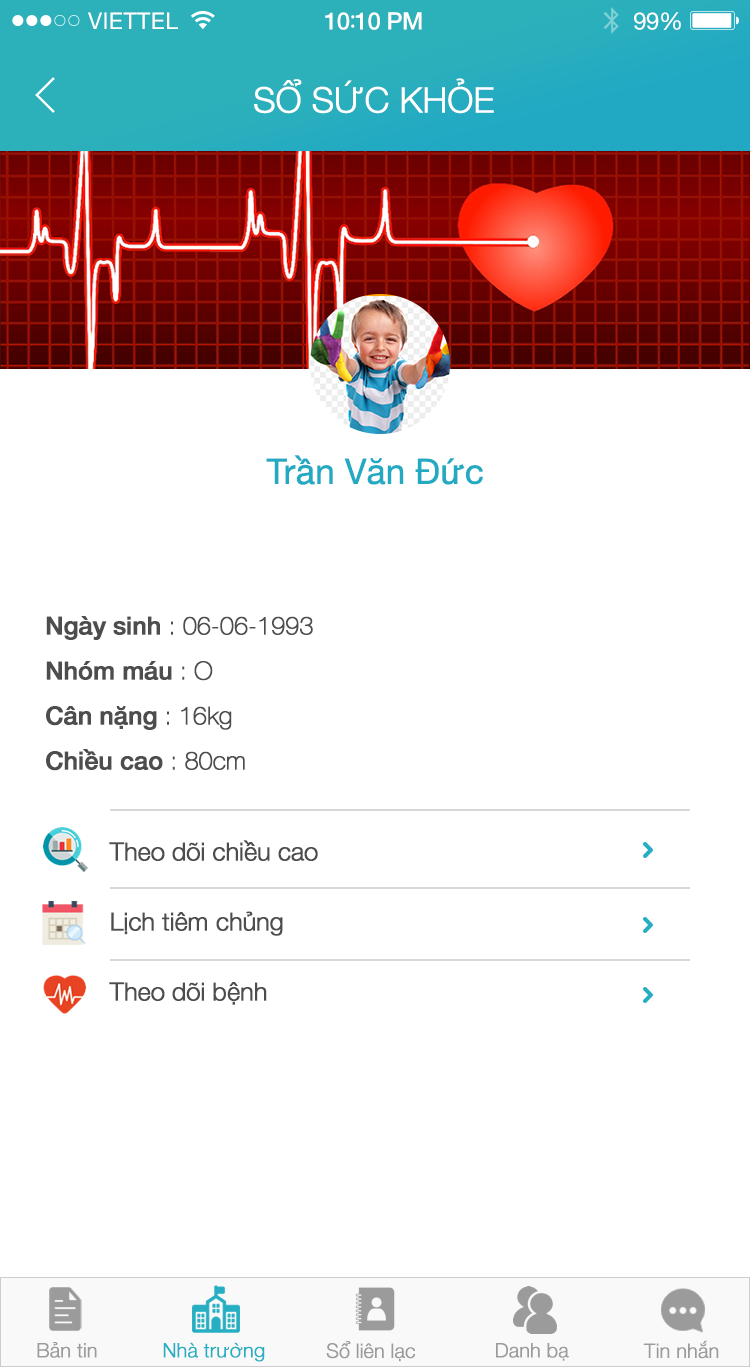
<style>
.page{position:relative;width:750px;height:1367px;background:#ffffff}
.page>*{position:absolute;margin:0}
.t1{font:23px "HelveticaNeue";letter-spacing:0.02em;color:#ffffff}
.t2{font:24px "HelveticaNeue-Medium";letter-spacing:-0.02em;color:#ffffff}
.t3{font:26px "MyriadPro-Regular";letter-spacing:-0.02em;color:#ffffff}
.t4{font:24px "HelveticaNeue";letter-spacing:-0.02em;color:#ffffff}
.t5{font:35px "HelveticaNeue-Light";letter-spacing:-0.02em;color:#ffffff;font-weight:bold}
.t6{font:35px "HelveticaNeue";letter-spacing:-0.02em;color:#22aac3;font-weight:bold}
.t7{font:25px/45px "HelveticaNeue-Thin";letter-spacing:-0.02em;color:#4d4d4d;font-weight:bold}
.t8{font:25px/45px "HelveticaNeue-Medium";letter-spacing:-0.02em;color:#4d4d4d;font-weight:bold}
.t9{font:25px/70px "HelveticaNeue-Light";letter-spacing:-0.02em;color:#4d4d4d;font-weight:bold}
.t10{font:20px "HelveticaNeue-Light";letter-spacing:-0.02em;color:#9b9b9b;font-weight:bold}
.t11{font:20px "HelveticaNeue-Light";letter-spacing:-0.02em;color:#26afc2;font-weight:bold}
</style>
<div class="page">
<p class="t1" style="left:88px;top:12px;width:90px;height:17px">VIETTEL</p>
<p class="t2" style="left:325px;top:12px;width:97px;height:18px">10<span class="t3">:</span>10 PM</p>
<p class="t4" style="left:634px;top:12px;width:47px;height:18px">99%</p>
<p class="t5" style="left:254px;top:78px;width:240px;height:36px">SỔ SỨC KHỎE</p>
<p class="t6" style="left:266px;top:455px;width:217px;height:30px">Trần Văn Đức</p>
<p class="t7" style="left:46px;top:616px;width:267px;height:155px"><span class="t8">Ngày sinh</span> : 06-06-1993<br><span class="t8">Nhóm máu</span> : O<br><span class="t8">Cân nặng</span> : 16kg<br><span class="t8">Chiều cao</span> : 80cm</p>
<p class="t9" style="left:109px;top:840px;width:209px;height:165px">Theo dõi chiều cao<br>Lịch tiêm chủng<br>Theo dõi bệnh</p>
<p class="t10" style="left:37px;top:1342px;width:60px;height:16px">Bản tin</p>
<p class="t11" style="left:163px;top:1342px;width:102px;height:20px">Nhà trường</p>
<p class="t10" style="left:326px;top:1341px;width:90px;height:21px">Sổ liên lạc</p>
<p class="t10" style="left:496px;top:1343px;width:73px;height:18px">Danh bạ</p>
<p class="t10" style="left:643px;top:1340px;width:76px;height:19px">Tin nhắn</p>
</div>
